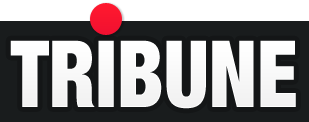
<style>
.page{position:relative;width:309px;height:122px;background:#191c1d}
.page>*{position:absolute;margin:0}
.t1{font:92.7px "HelveticaNeue-BlackCond";color:#f9f9f9;scale:0.88 1}
</style>
<div class="page">
<p class="t1" style="left:10px;top:40px;width:286px;height:69px">TRIBUNE</p>
</div>
